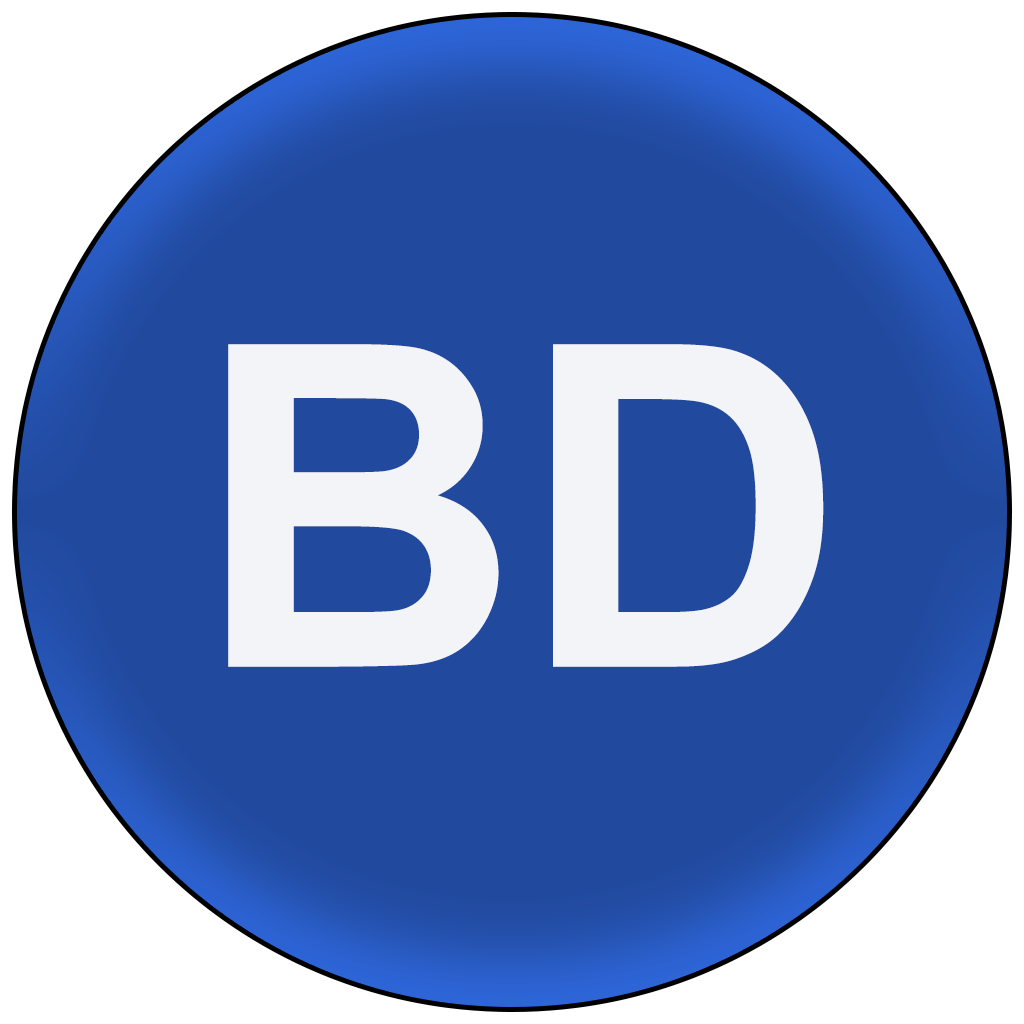
<style>
.page{position:relative;width:1024px;height:1024px;background:#21499d}
.page>*{position:absolute;margin:0}
.t1{font:450px "Arial-BoldMT";color:#f3f4f8}
</style>
<div class="page">
<p class="t1" style="left:228px;top:344px;width:596px;height:323px">BD</p>
</div>
